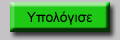
<style>
.page{position:relative;width:120px;height:40px;background:#1ec915}
.page>*{position:absolute;margin:0}
.t1{font:14px "ArialMT";color:#000000}
</style>
<div class="page">
<p class="t1" style="left:27px;top:11px;width:65px;height:14px">Υπολόγισε</p>
</div>
